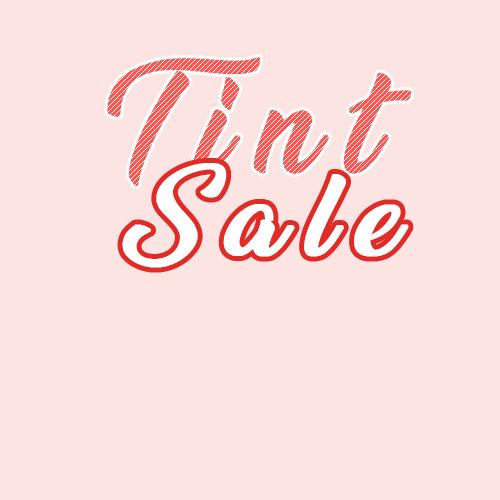
<style>
.page{position:relative;width:500px;height:500px;background:#fce4e2}
.page>*{position:absolute;margin:0}
.t1{font:120px "Ananda";letter-spacing:0.2em;color:#fe5550;font-weight:bold}
.t2{font:100px "AnandaBlackPersonalUse-Regular";letter-spacing:0.2em;color:#ffffff;font-weight:bold}
</style>
<div class="page">
<p class="t1" style="left:107px;top:57px;width:305px;height:130px">Tint</p>
<p class="t2" style="left:122px;top:163px;width:287px;height:105px">Sale</p>
</div>
